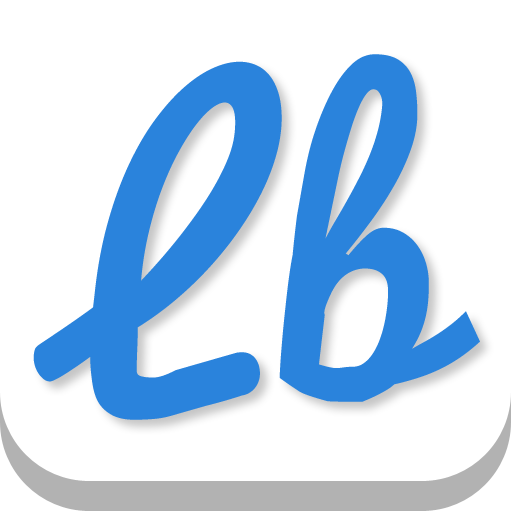
<style>
.page{position:relative;width:512px;height:512px;background:#ffffff}
.page>*{position:absolute;margin:0}
.t1{font:370.6px "Pacifico";color:#2a83dc}
</style>
<div class="page">
<p class="t1" style="left:33px;top:54px;width:447px;height:366px">L b</p>
</div>
